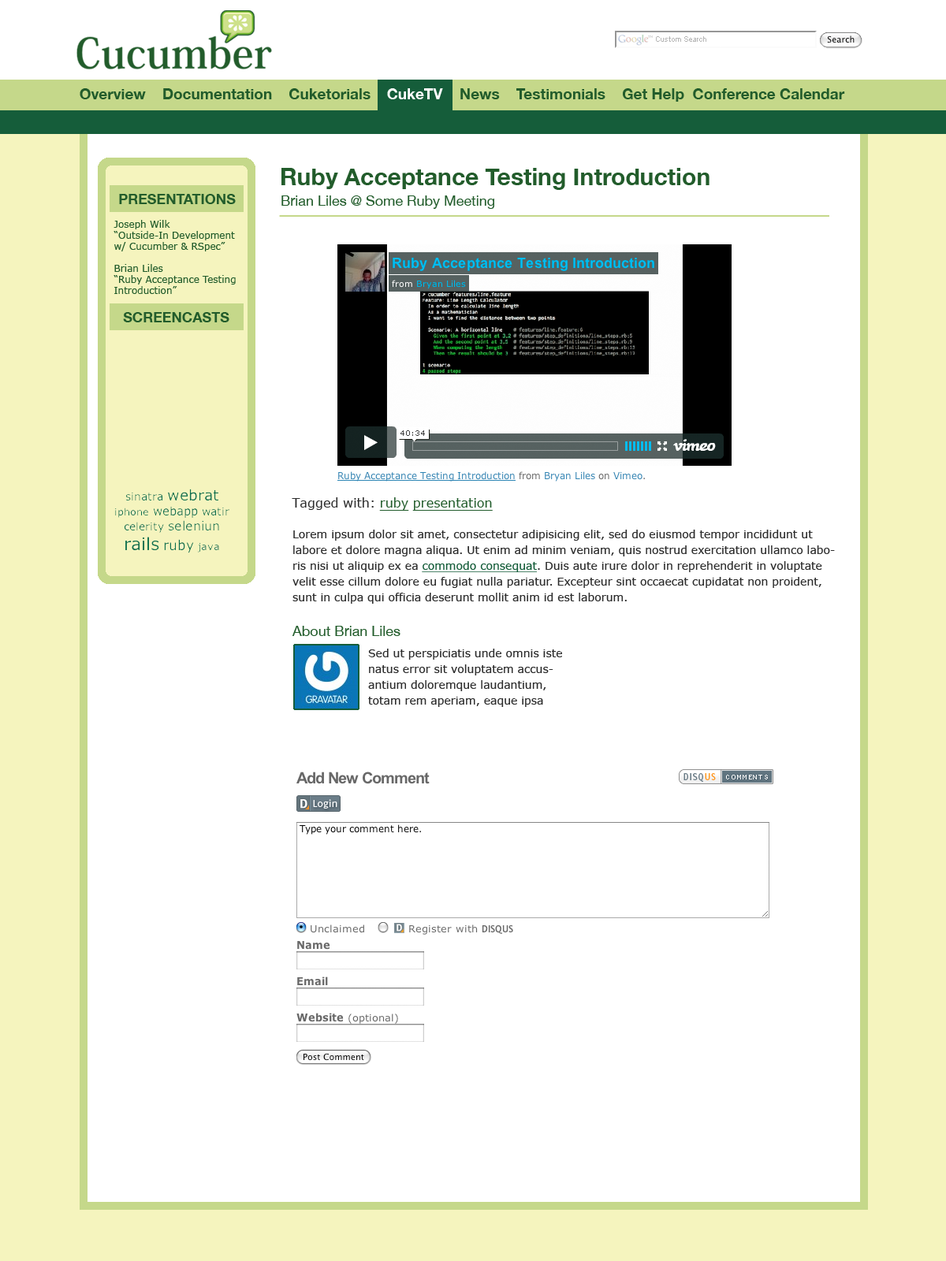
<style>
.page{position:relative;width:946px;height:1261px;background:#ffffff}
.page>*{position:absolute;margin:0}
.t1{font:15px "HelveticaNeue-Bold";color:#225c2b}
.t2{font:15px "HelveticaNeue-Bold";color:#ffffff}
.t3{font:23.6px "HelveticaNeue-Bold";color:#225c2b}
.t4{font:14.2px "HelveticaNeue-Bold";color:#225c2b}
.t5{font:14.2px "HelveticaNeue";color:#225c2b}
.t6{font:9.5px/11px "Verdana";color:#225c2b}
.t7{font:12.6px "Verdana";color:#225c2b;text-decoration:underline}
.t8{font:12.6px "Verdana";color:#2d2d2d}
.t9{font:11px/15.8px "Verdana";color:#2d2d2d}
.t10{font:11px/15.8px "Verdana";color:#155d3a;text-decoration:underline}
</style>
<div class="page">
<p class="t1" style="left:80px;top:88px;width:765px;height:14px">Overview    Documentation    Cuketorials    CukeTV    News    Testimonials    Get Help  Conference Calendar</p>
<p class="t2" style="left:387px;top:88px;width:56px;height:11px">CukeTV</p>
<p class="t3" style="left:281px;top:168px;width:428px;height:22px">Ruby Acceptance Testing Introduction</p>
<p class="t4" style="left:119px;top:194px;width:117px;height:10px">PRESENTATIONS</p>
<p class="t5" style="left:281px;top:195px;width:213px;height:14px">Brian Liles @ Some Ruby Meeting</p>
<p class="t6" style="left:113px;top:220px;width:123px;height:74px">Joseph Wilk <br>“Outside-In Development<br>w/ Cucumber &amp; RSpec” <br><br>Brian Liles<br>“Ruby Acceptance Testing Introduction”</p>
<p class="t4" style="left:123px;top:312px;width:106px;height:10px">SCREENCASTS</p>
<p class="t7" style="left:292px;top:497px;width:201px;height:14px"><span class="t8">Tagged with: </span>ruby presentation</p>
<p class="t9" style="left:292px;top:530px;width:543px;height:74px">Lorem ipsum dolor sit amet, consectetur adipisicing elit, sed do eiusmod tempor incididunt ut labore et dolore magna aliqua. Ut enim ad minim veniam, quis nostrud exercitation ullamco laboris nisi ut aliquip ex ea <span class="t10">commodo consequat</span>. Duis aute irure dolor in reprehenderit in voluptate velit esse cillum dolore eu fugiat nulla pariatur. Excepteur sint occaecat cupidatat non proident, sunt in culpa qui officia deserunt mollit anim id est laborum.</p>
<p class="t5" style="left:292px;top:626px;width:108px;height:10px">About Brian Liles</p>
<p class="t9" style="left:368px;top:649px;width:194px;height:58px">Sed ut perspiciatis unde omnis iste natus error sit voluptatem accusantium doloremque laudantium, totam rem aperiam, eaque ipsa quae ab illo inventore veritatis et quasi architecto beatae vitae dicta sunt explicabo.</p>
</div>
